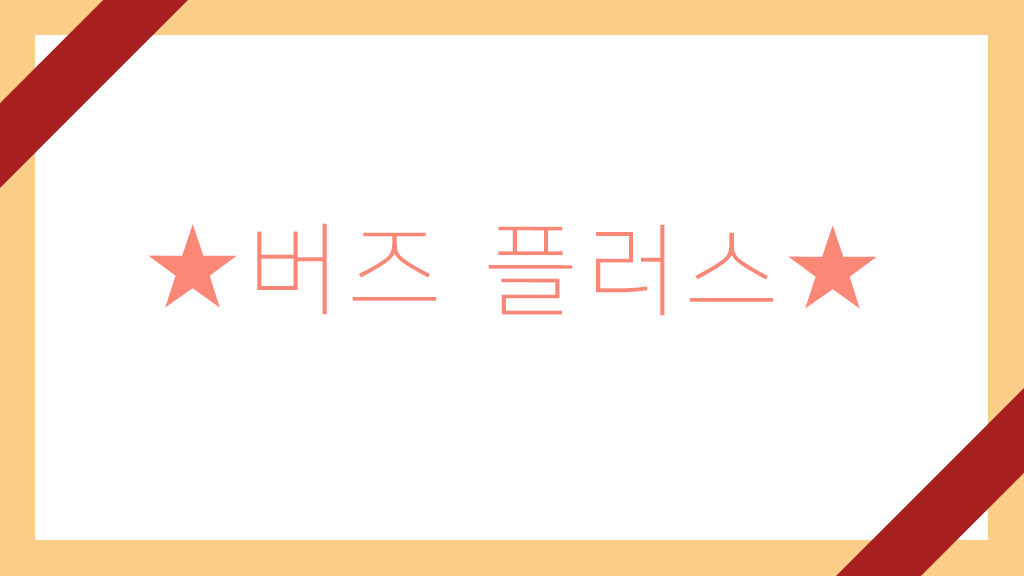
<style>
.page{position:relative;width:1024px;height:576px;background:#ffffff}
.page>*{position:absolute;margin:0}
.t1{font:100px "NanumSquareL";letter-spacing:0.1em;color:#fb8777}
</style>
<div class="page">
<p class="t1" style="left:148px;top:223px;width:729px;height:93px">★버즈 플러스★</p>
</div>
